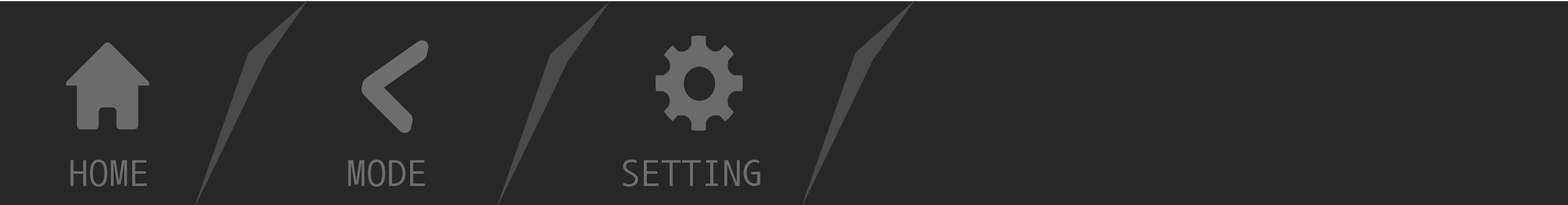
<style>
.page{position:relative;width:1568px;height:205px;background:#272727}
.page>*{position:absolute;margin:0}
.t1{font:89.2px "NanumGothicCoding";color:#6e6e6e;font-weight:bold;font-style:italic;scale:1.22 1}
.t2{font:37.6px "NanumGothicCoding";color:#6e6e6e;scale:1.08 1}
</style>
<div class="page">
<p class="t1" style="left:366px;top:46px;width:57px;height:82px">&lt;</p>
<p class="t2" style="left:70px;top:160px;width:77px;height:27px">HOME</p>
<p class="t2" style="left:348px;top:160px;width:77px;height:27px">MODE</p>
<p class="t2" style="left:623px;top:160px;width:138px;height:27px">SETTING</p>
</div>
